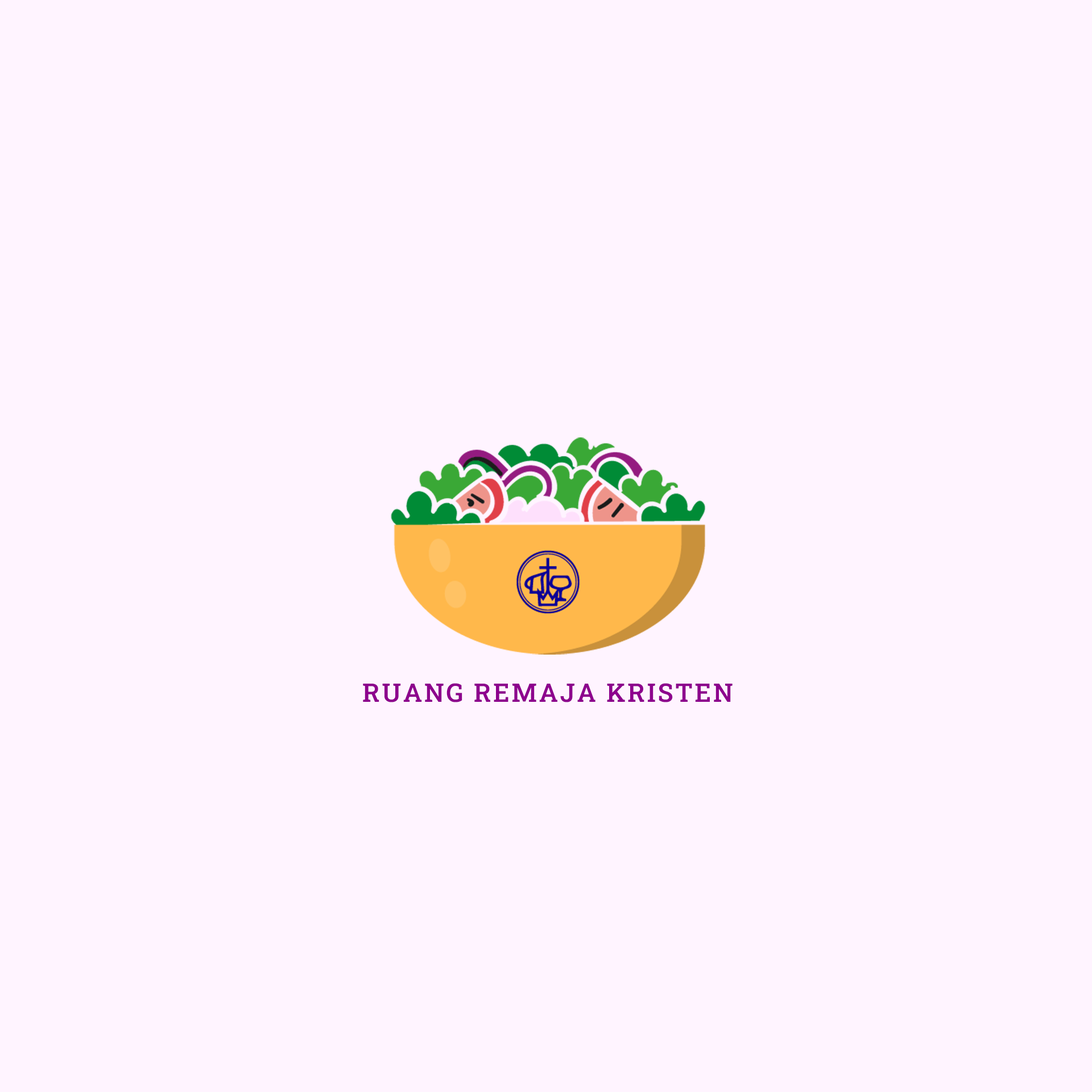
<style>
.page{position:relative;width:1092px;height:1092px;background:#fff4ff}
.page>*{position:absolute;margin:0}
.t1{font:25.6px "RobotoSlab-Medium";letter-spacing:0.08em;color:#8d008d;text-transform:uppercase}
</style>
<div class="page">
<p class="t1" style="left:363px;top:683px;width:370px;height:19px">Ruang remaja kristen</p>
</div>
